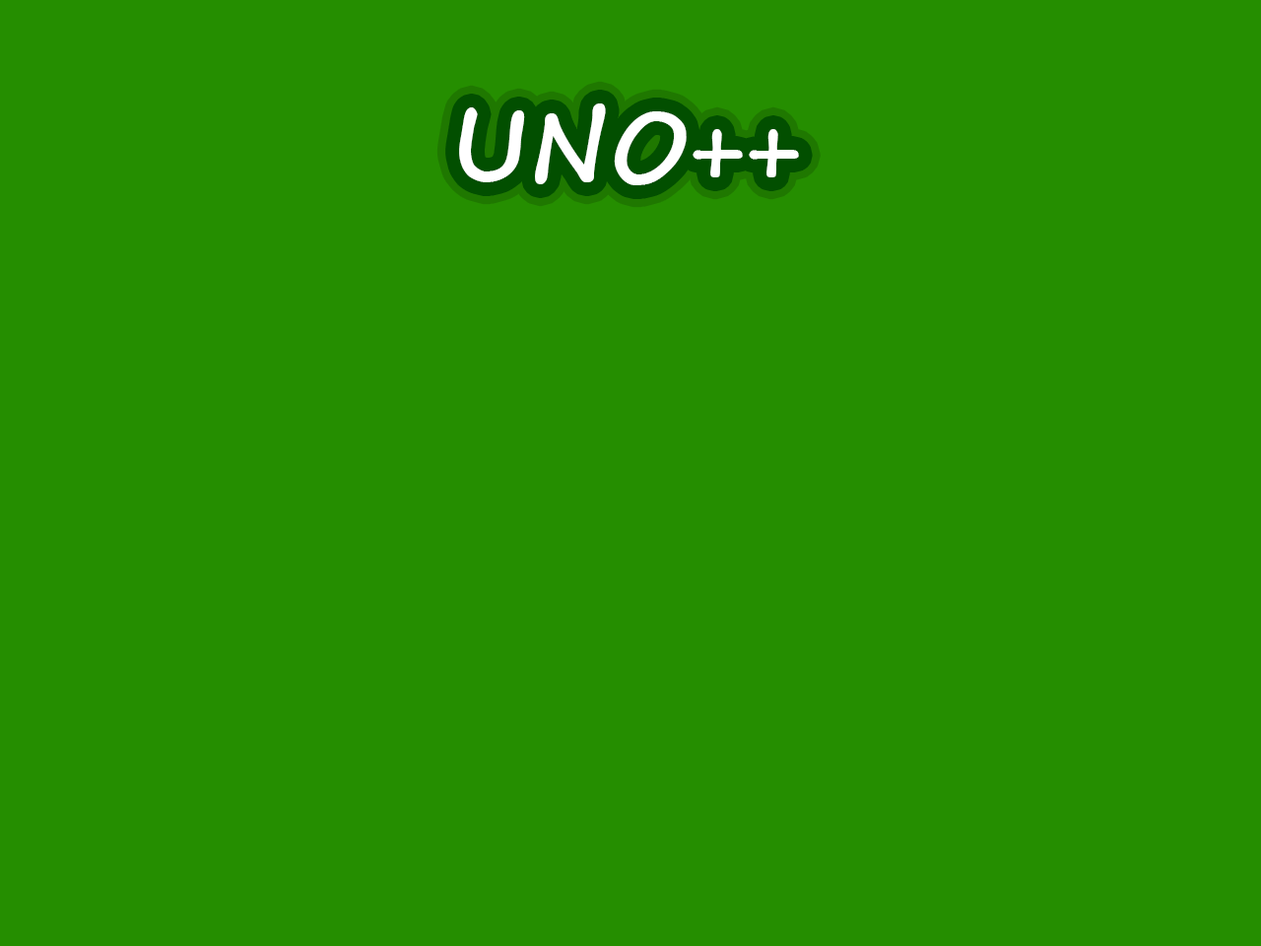
<style>
.page{position:relative;width:1261px;height:946px;background:#258e00}
.page>*{position:absolute;margin:0}
.t1{font:98.5px "SegoeScript-Bold";color:#ffffff}
</style>
<div class="page">
<p class="t1" style="left:459px;top:103px;width:340px;height:82px">UNO++</p>
</div>
